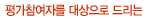
<style>
.page{position:relative;width:147px;height:20px;background:#ffffff}
.page>*{position:absolute;margin:0}
.t1{font:12.7px "YDIYGO330";letter-spacing:-0.05em;color:#cf2c00;scale:0.91 1}
</style>
<div class="page">
<p class="t1" style="left:5px;top:4px;width:138px;height:12px">평가참여자를 대상으로 드리는</p>
</div>
